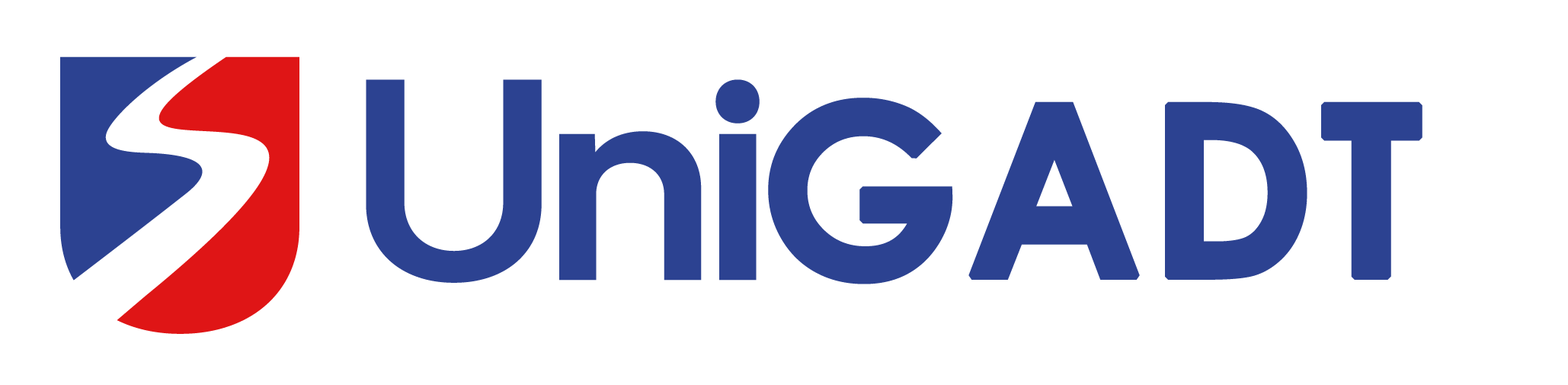
<style>
.page{position:relative;width:1568px;height:385px;background:#ffffff}
.page>*{position:absolute;margin:0}
.t1{font:238.1px "CenturyGothic-Bold";color:#2c4291;font-weight:bold}
</style>
<div class="page">
<p class="t1" style="left:768px;top:98px;width:654px;height:186px">GADT</p>
</div>
